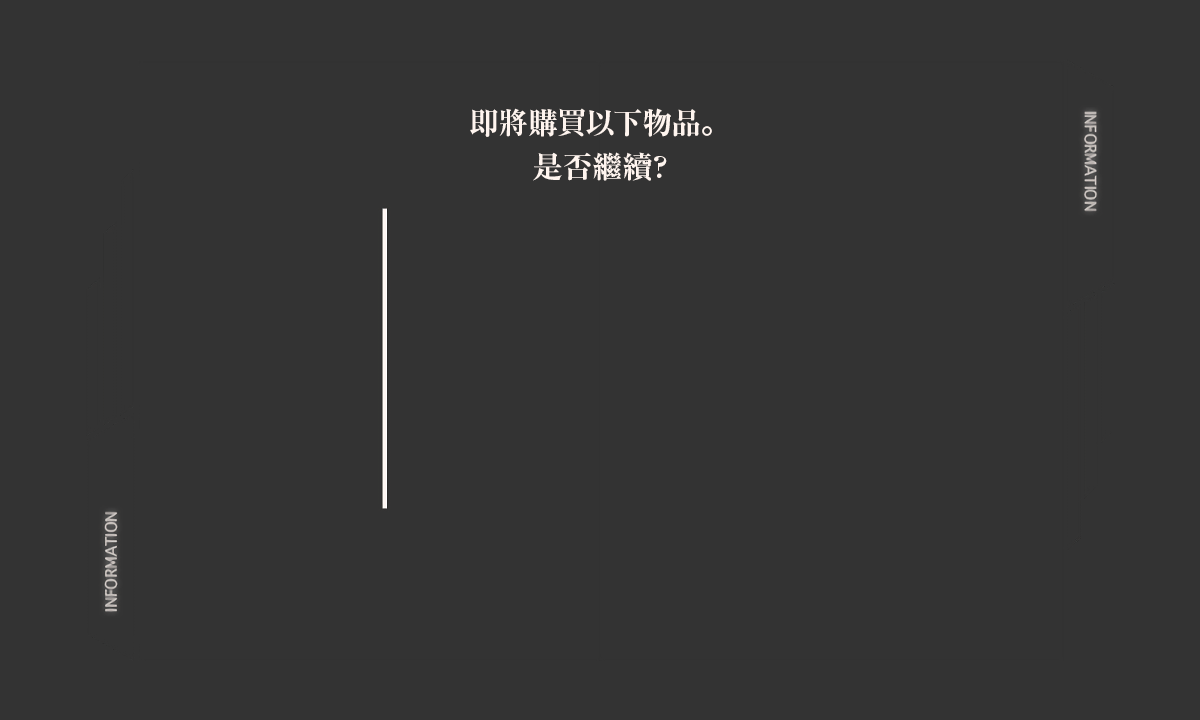
<style>
.page{position:relative;width:1200px;height:720px;background:#333333}
.page>*{position:absolute;margin:0}
.t1{font:30px/44px "RyuminPr6N-ExBold";color:#fff5ef}
</style>
<div class="page">
<p class="t1" style="left:470px;top:108px;width:242px;height:73px;text-align:center">即將購買以下物品。<br>是否繼續?</p>
</div>
